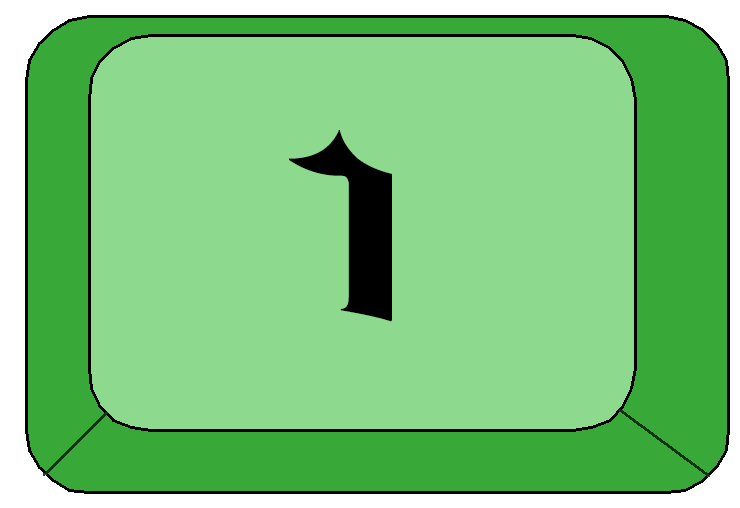
<style>
.page{position:relative;width:740px;height:508px;background:#8dd98d}
.page>*{position:absolute;margin:0}
.t1{font:288px "NightmareHero";color:#010000}
</style>
<div class="page">
<p class="t1" style="left:289px;top:130px;width:103px;height:192px">1</p>
</div>
